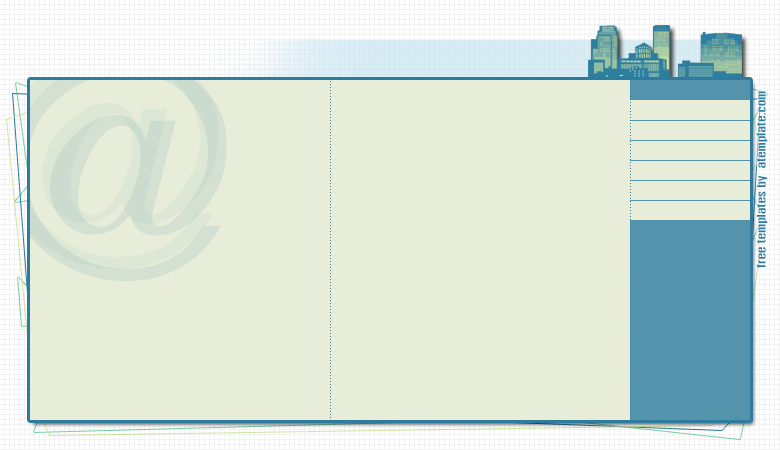
<style>
.page{position:relative;width:780px;height:450px;background:#e7edd8}
.page>*{position:absolute;margin:0}
.t1{font:12px "DSEPatPongExtend";letter-spacing:0.025em;color:#2d7da0}
</style>
<div class="page">
<p class="t1" style="left:756px;top:91px;width:12px;height:177px;rotate:-90deg">free templates by  atemplate.com</p>
</div>
